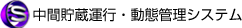
<style>
.page{position:relative;width:242px;height:28px;background:#ffffff}
.page>*{position:absolute;margin:0}
.t1{font:14px "ShinGoPro-Regular";color:#000000}
</style>
<div class="page">
<p class="t1" style="left:33px;top:7px;width:209px;height:15px">中間貯蔵運行・動態管理システム</p>
</div>
